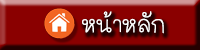
<style>
.page{position:relative;width:200px;height:50px;background:#8a0000}
.page>*{position:absolute;margin:0}
.t1{font:36px "THMaliGrade6-Bold";color:#fefefe}
</style>
<div class="page">
<p class="t1" style="left:82px;top:11px;width:82px;height:23px">หน้าหลัก</p>
</div>
